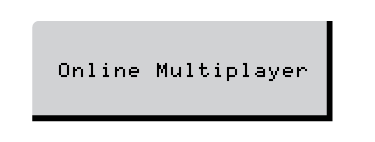
<style>
.page{position:relative;width:375px;height:142px;background:#d1d2d4}
.page>*{position:absolute;margin:0}
.t1{font:16px "Mono0756";color:#000000}
</style>
<div class="page">
<p class="t1" style="left:58px;top:62px;width:250px;height:20px">Online Multiplayer</p>
</div>
